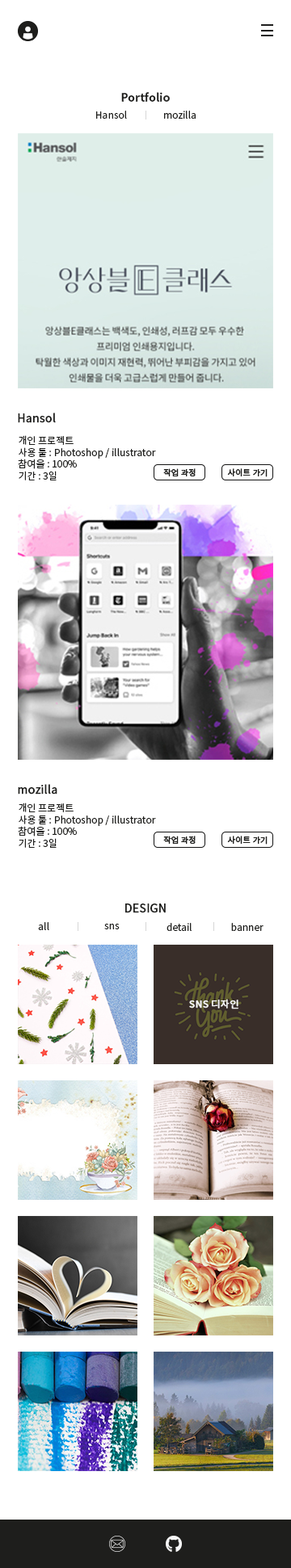
<style>
.page{position:relative;width:291px;height:1568px;background:#ffffff}
.page>*{position:absolute;margin:0}
.t1{font:11.3px "NotoSansKR-Bold";color:#1e1e1c}
.t2{font:9.7px "NotoSansKR-Regular";color:#1e1e1c}
.t3{font:11.3px "NotoSansKR-Regular";color:#1e1e1c;font-weight:bold}
.t4{font:8.1px "NotoSansKR-Regular";color:#1e1e1c;font-weight:bold}
.t5{font:9.7px "NotoSansKR-Regular";color:#f7f7f7;font-weight:bold}
</style>
<div class="page">
<p class="t1" style="left:121px;top:92px;width:49px;height:10px">Portfolio</p>
<p class="t2" style="left:96px;top:111px;width:31px;height:8px">Hansol</p>
<p class="t2" style="left:164px;top:111px;width:31px;height:8px">mozilla</p>
<p class="t3" style="left:18px;top:413px;width:38px;height:10px">Hansol</p>
<p class="t2" style="left:18px;top:435px;width:138px;height:45px">개인 프로젝트<br>사용 툴 : Photoshop / illustrator<br>참여율 : 100%<br>기간 : 3일</p>
<p class="t4" style="left:163px;top:468px;width:32px;height:8px">작업 과정</p>
<p class="t4" style="left:227px;top:468px;width:40px;height:9px">사이트 가기</p>
<p class="t3" style="left:18px;top:784px;width:39px;height:10px">mozilla</p>
<p class="t2" style="left:18px;top:803px;width:138px;height:45px">개인 프로젝트<br>사용 툴 : Photoshop / illustrator<br>참여율 : 100%<br>기간 : 3일</p>
<p class="t4" style="left:163px;top:836px;width:32px;height:8px">작업 과정</p>
<p class="t4" style="left:227px;top:836px;width:40px;height:9px">사이트 가기</p>
<p class="t3" style="left:125px;top:903px;width:41px;height:10px">DESIGN</p>
<p class="t2" style="left:38px;top:922px;width:11px;height:8px">all</p>
<p class="t2" style="left:104px;top:924px;width:15px;height:5px">sns</p>
<p class="t2" style="left:166px;top:923px;width:25px;height:8px">detail</p>
<p class="t2" style="left:231px;top:923px;width:32px;height:8px">banner</p>
<p class="t5" style="left:189px;top:999px;width:49px;height:10px">SNS 디자인</p>
</div>
